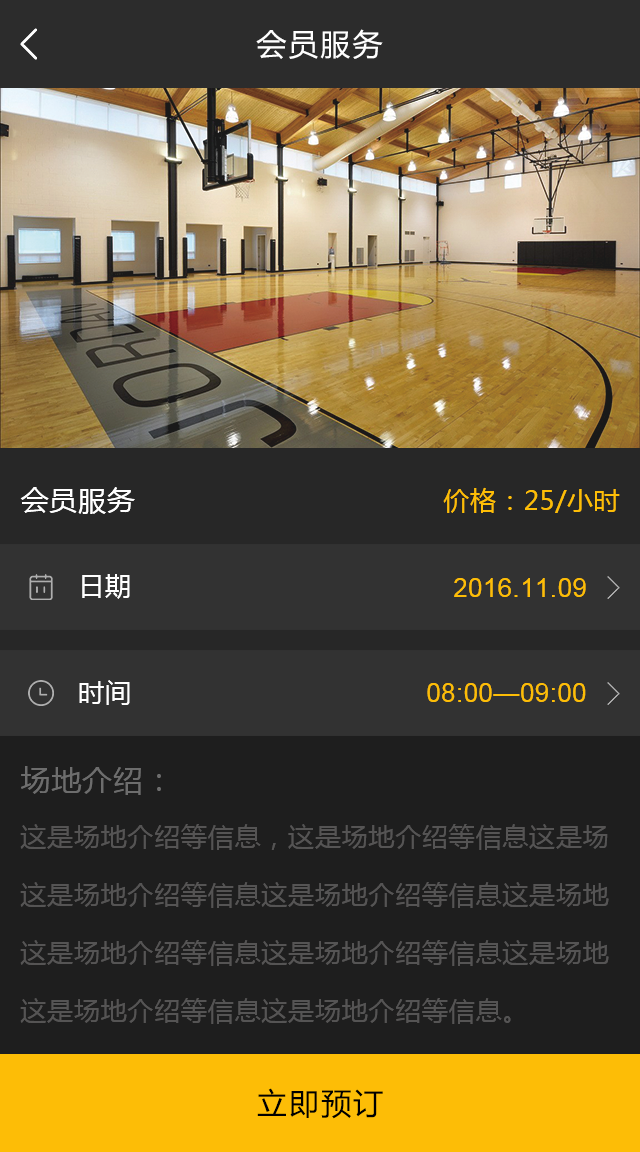
<style>
.page{position:relative;width:640px;height:1152px;background:#1e1e1e}
.page>*{position:absolute;margin:0}
.t1{font:30px "MicrosoftYaHei";letter-spacing:0.07em;color:#ffffff}
.t2{font:28px "MicrosoftYaHei";letter-spacing:0.03em;color:#ffffff}
.t3{font:26px "MicrosoftYaHei";letter-spacing:0.03em;color:#fdbd06}
.t4{font:26px "MicrosoftYaHei";letter-spacing:0.03em;color:#ffffff}
.t5{font:26px "ArialMT";letter-spacing:0.03em;color:#fdbd06}
.t6{font:30px "MicrosoftYaHei";letter-spacing:0.03em;color:#6d6d6d}
.t7{font:26px/58px "MicrosoftYaHei";letter-spacing:0.03em;color:#555454}
.t8{font:30px "MicrosoftYaHei";letter-spacing:0.07em;color:#000000}
</style>
<div class="page">
<p class="t1" style="left:256px;top:29px;width:127px;height:30px">会员服务</p>
<p class="t2" style="left:20px;top:487px;width:115px;height:27px">会员服务</p>
<p class="t3" style="left:443px;top:487px;width:177px;height:26px">价格：25/小时</p>
<p class="t4" style="left:82px;top:574px;width:48px;height:25px">日期</p>
<p class="t5" style="left:454px;top:578px;width:132px;height:19px">2016.11.09</p>
<p class="t4" style="left:79px;top:680px;width:51px;height:25px">时间</p>
<p class="t5" style="left:427px;top:683px;width:159px;height:19px">08:00—09:00</p>
<p class="t6" style="left:21px;top:766px;width:140px;height:29px">场地介绍：</p>
<p class="t7" style="left:20px;top:824px;width:589px;height:200px;text-align:justify">这是场地介绍等信息，这是场地介绍等信息这是场<br>这是场地介绍等信息这是场地介绍等信息这是场地<br>这是场地介绍等信息这是场地介绍等信息这是场地<br>这是场地介绍等信息这是场地介绍等信息。</p>
<p class="t8" style="left:257px;top:1088px;width:126px;height:31px">立即预订</p>
</div>
